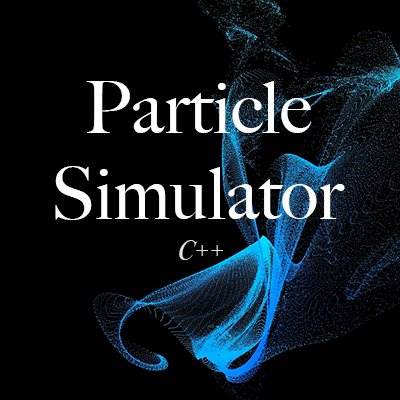
<style>
.page{position:relative;width:400px;height:400px;background:#000000}
.page>*{position:absolute;margin:0}
.t1{font:72px "BigCaslon-Medium";color:#ffffff}
.t2{font:28px "BodoniSvtyTwoITCTT-BookIta";color:#e1e1e1}
</style>
<div class="page">
<p class="t1" style="left:55px;top:81px;width:290px;height:139px;text-align:center">Particle<br>Simulator</p>
<p class="t2" style="left:179px;top:240px;width:44px;height:20px">C++</p>
</div>
